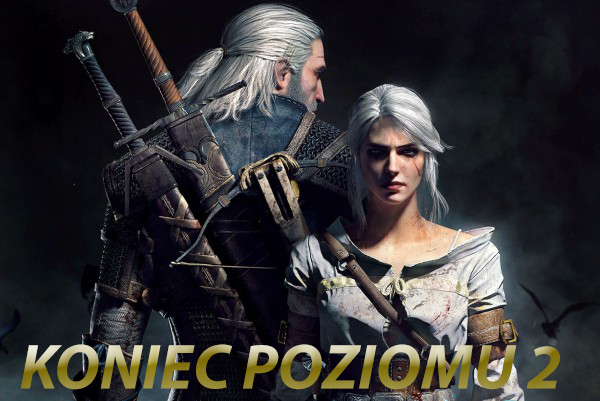
<style>
.page{position:relative;width:600px;height:401px}
.page>*{position:absolute;margin:0}
.t1{font:64px "MyriadPro-BoldIt"}
</style>
<div class="page">
<p class="t1" style="left:20px;top:344px;width:540px;height:46px">KONIEC POZIOMU 2</p>
</div>
